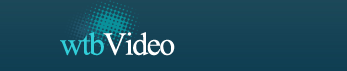
<style>
.page{position:relative;width:347px;height:71px}
.page>*{position:absolute;margin:0}
.t1{font:32.1px "TimesNewRomanPSMT";letter-spacing:-0.05em;color:#ffffff}
.t2{font:32.1px "TimesNewRomanPSMT";letter-spacing:-0.05em;color:#31ced9}
</style>
<div class="page">
<p class="t1" style="left:60px;top:32px;width:115px;height:24px"><span class="t2">wtb</span>Video</p>
</div>
